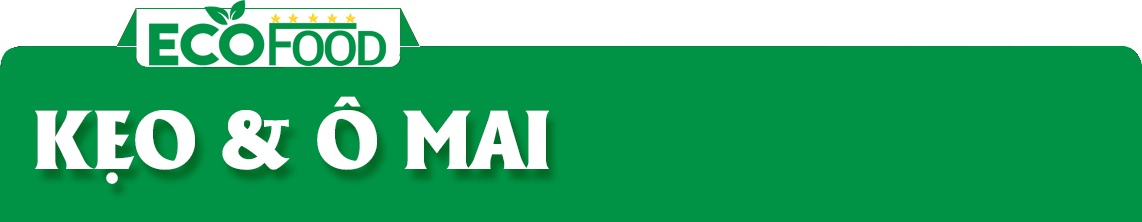
<style>
.page{position:relative;width:1142px;height:222px;background:#009345}
.page>*{position:absolute;margin:0}
.t1{font:81px "UTM-Alberta-Heavy";color:#ffffff}
</style>
<div class="page">
<p class="t1" style="left:35px;top:96px;width:514px;height:88px">KẸO &amp; Ô MAI</p>
</div>
